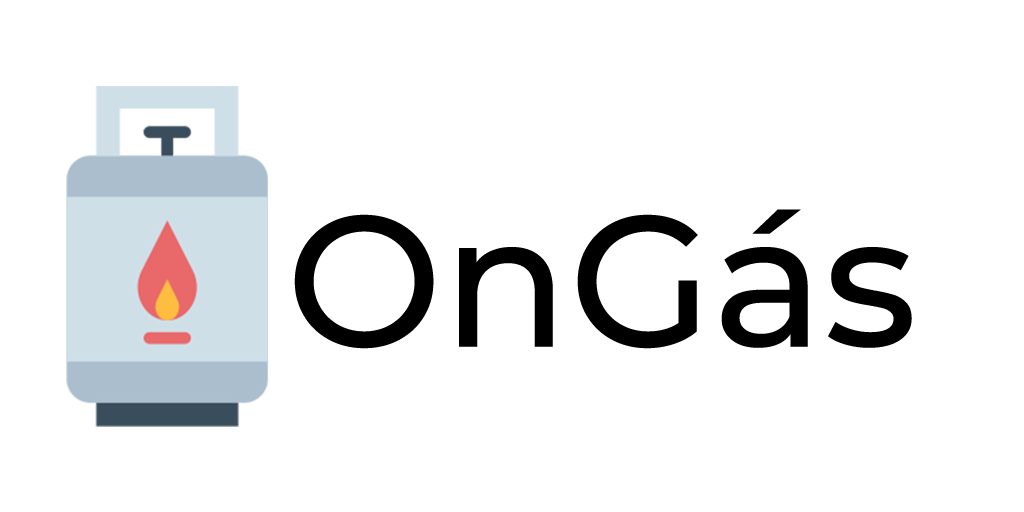
<style>
.page{position:relative;width:1024px;height:512px;background:#ffffff}
.page>*{position:absolute;margin:0}
.t1{font:186px "Montserrat-Medium";color:#000000}
</style>
<div class="page">
<p class="t1" style="left:294px;top:209px;width:618px;height:140px">OnGás</p>
</div>
